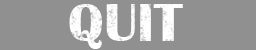
<style>
.page{position:relative;width:256px;height:50px;background:#909090}
.page>*{position:absolute;margin:0}
.t1{font:55.4px "BritannicBold";color:#ffffff}
</style>
<div class="page">
<p class="t1" style="left:69px;top:4px;width:114px;height:45px">QUIT</p>
</div>
